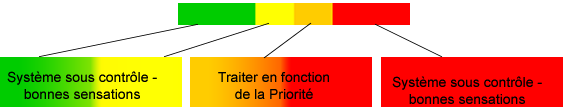
<style>
.page{position:relative;width:563px;height:107px;background:#ffffff}
.page>*{position:absolute;margin:0}
.t1{font:14px "ArialMT";color:#000000}
</style>
<div class="page">
<p class="t1" style="left:7px;top:72px;width:154px;height:35px;text-align:center">Système sous contrôle - <br>bonnes sensations</p>
<p class="t1" style="left:218px;top:72px;width:116px;height:35px;text-align:center">Traiter en fonction <br>de la Priorité</p>
</div>
